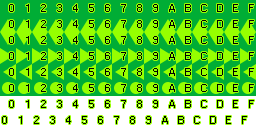
<style>
.page{position:relative;width:256px;height:128px;background:#00ad35}
.page>*{position:absolute;margin:0}
.t1{font:10px/16px "Small Fonts";color:#010000}
.t2{font:10px "Small Fonts";color:#000000}
</style>
<div class="page">
<p class="t1" style="left:9px;top:4px;width:5px;height:104px;text-align:center">0<br>0<br>0<br>0<br>0<br>0<br>0</p>
<p class="t1" style="left:26px;top:4px;width:3px;height:104px;text-align:center">1<br>1<br>1<br>1<br>1<br>1<br>1</p>
<p class="t1" style="left:41px;top:4px;width:5px;height:104px;text-align:center">2<br>2<br>2<br>2<br>2<br>2<br>2</p>
<p class="t1" style="left:57px;top:4px;width:5px;height:104px;text-align:center">3<br>3<br>3<br>3<br>3<br>3<br>3</p>
<p class="t1" style="left:73px;top:4px;width:5px;height:104px;text-align:center">4<br>4<br>4<br>4<br>4<br>4<br>4</p>
<p class="t1" style="left:89px;top:4px;width:5px;height:104px;text-align:center">5<br>5<br>5<br>5<br>5<br>5<br>5</p>
<p class="t1" style="left:105px;top:4px;width:5px;height:104px;text-align:center">6<br>6<br>6<br>6<br>6<br>6<br>6</p>
<p class="t1" style="left:121px;top:4px;width:5px;height:104px;text-align:center">7<br>7<br>7<br>7<br>7<br>7<br>7</p>
<p class="t1" style="left:137px;top:4px;width:5px;height:104px;text-align:center">8<br>8<br>8<br>8<br>8<br>8<br>8</p>
<p class="t1" style="left:153px;top:4px;width:5px;height:104px;text-align:center">9<br>9<br>9<br>9<br>9<br>9<br>9</p>
<p class="t1" style="left:169px;top:4px;width:6px;height:104px;text-align:center">A<br>A<br>A<br>A<br>A<br>A<br>A</p>
<p class="t1" style="left:185px;top:4px;width:6px;height:104px;text-align:center">B<br>B<br>B<br>B<br>B<br>B<br>B</p>
<p class="t1" style="left:201px;top:4px;width:6px;height:104px;text-align:center">C<br>C<br>C<br>C<br>C<br>C<br>C</p>
<p class="t1" style="left:217px;top:4px;width:6px;height:104px;text-align:center">D<br>D<br>D<br>D<br>D<br>D<br>D</p>
<p class="t1" style="left:233px;top:4px;width:5px;height:104px;text-align:center">E<br>E<br>E<br>E<br>E<br>E<br>E</p>
<p class="t1" style="left:249px;top:4px;width:5px;height:104px;text-align:center">F<br>F<br>F<br>F<br>F<br>F<br>F</p>
<p class="t2" style="left:2px;top:116px;width:5px;height:8px">0</p>
<p class="t2" style="left:19px;top:116px;width:3px;height:8px">1</p>
<p class="t2" style="left:34px;top:116px;width:5px;height:8px">2</p>
<p class="t2" style="left:50px;top:116px;width:5px;height:8px">3</p>
<p class="t2" style="left:66px;top:116px;width:5px;height:8px">4</p>
<p class="t2" style="left:82px;top:116px;width:5px;height:8px">5</p>
<p class="t2" style="left:98px;top:116px;width:5px;height:8px">6</p>
<p class="t2" style="left:114px;top:116px;width:5px;height:8px">7</p>
<p class="t2" style="left:130px;top:116px;width:5px;height:8px">8</p>
<p class="t2" style="left:146px;top:116px;width:5px;height:8px">9</p>
<p class="t2" style="left:162px;top:116px;width:6px;height:8px">A</p>
<p class="t2" style="left:178px;top:116px;width:6px;height:8px">B</p>
<p class="t2" style="left:194px;top:116px;width:6px;height:8px">C</p>
<p class="t2" style="left:210px;top:116px;width:6px;height:8px">D</p>
<p class="t2" style="left:226px;top:116px;width:5px;height:8px">E</p>
<p class="t2" style="left:242px;top:116px;width:5px;height:8px">F</p>
</div>
